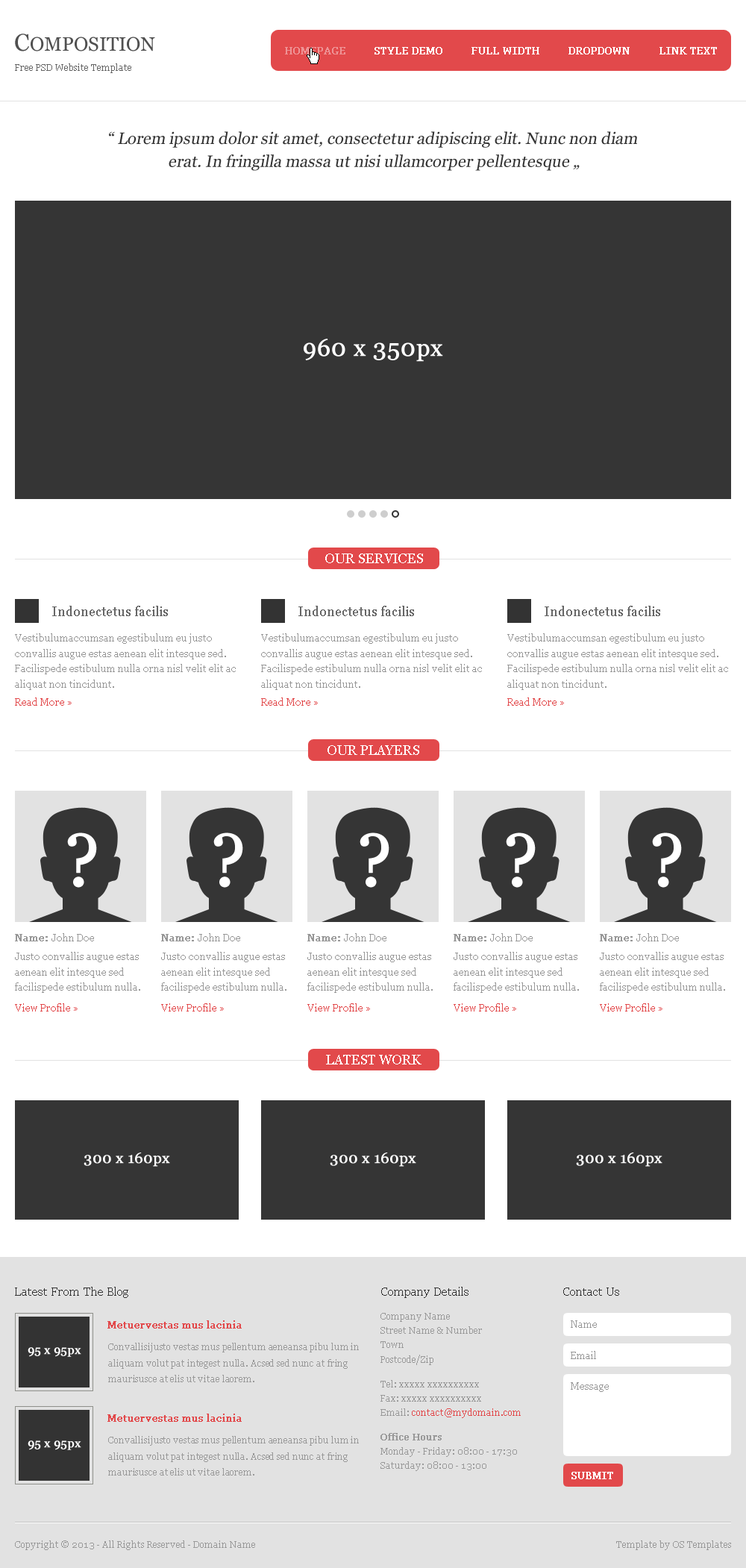
<style>
.page{position:relative;width:746px;height:1568px;background:#ffffff}
.page>*{position:absolute;margin:0}
.t1{font:19.4px "Georgia";color:#505050}
.t2{font:23.9px "Georgia";color:#505050}
.t3{font:9.7px "Georgia";color:#ee9395;font-weight:bold}
.t4{font:9.7px "Georgia";color:#ffffff;font-weight:bold}
.t5{font:9px "Georgia";color:#666666}
.t6{font:16.4px/23px "Georgia";color:#333333;font-style:italic}
.t7{font:23.9px "Georgia";color:#ffffff;font-weight:bold}
.t8{font:13.4px "Georgia";color:#ffffff}
.t9{font:13.4px "Georgia";color:#666666}
.t10{font:9.7px/15.5px "Georgia";color:#979797}
.t11{font:9.7px "Georgia";color:#e2494b}
.t12{font:74.6px "Georgia";color:#ffffff;font-weight:bold}
.t13{font:9.7px "Georgia";color:#979797}
.t14{font:9.7px "Georgia";color:#979797;font-weight:bold}
.t15{font:14.9px "Georgia";color:#ffffff;font-weight:bold}
.t16{font:11.9px "Georgia";color:#333333}
.t17{font:9px/14.3px "Georgia";color:#999999}
.t18{font:9.7px "Georgia";color:#e2494b;font-weight:bold}
.t19{font:9.7px "Georgia";color:#989898}
.t20{font:11.9px "Georgia";color:#ffffff;font-weight:bold}
.t21{font:9px/16.1px "Georgia";letter-spacing:-0.01em;color:#999999}
.t22{font:9px/14.3px "Georgia";color:#e2494b}
.t23{font:9px/14.3px "Georgia";color:#999999;font-weight:bold}
.t24{font:9px "Georgia";color:#999999}
</style>
<div class="page">
<p class="t1" style="left:15px;top:34px;width:140px;height:17px"><span class="t2">C</span>OMPOSITION</p>
<p class="t3" style="left:285px;top:47px;width:60px;height:7px">HOMEPAGE</p>
<p class="t4" style="left:374px;top:47px;width:68px;height:7px">STYLE DEMO</p>
<p class="t4" style="left:471px;top:47px;width:68px;height:7px">FULL WIDTH</p>
<p class="t4" style="left:568px;top:47px;width:62px;height:7px">DROPDOWN</p>
<p class="t4" style="left:659px;top:47px;width:58px;height:7px">LINK TEXT</p>
<p class="t5" style="left:15px;top:63px;width:116px;height:10px">Free PSD Website Template</p>
<p class="t6" style="left:109px;top:131px;width:528px;height:40px;text-align:center">“ Lorem ipsum dolor sit amet, consectetur adipiscing elit. Nunc non diam <br>erat. In fringilla massa ut nisi ullamcorper pellentesque „</p>
<p class="t7" style="left:304px;top:339px;width:139px;height:23px">960 x 350px</p>
<p class="t8" style="left:325px;top:553px;width:98px;height:10px">OUR SERVICES</p>
<p class="t9" style="left:52px;top:606px;width:116px;height:10px">Indonectetus facilis</p>
<p class="t9" style="left:298px;top:606px;width:116px;height:10px">Indonectetus facilis</p>
<p class="t9" style="left:545px;top:606px;width:115px;height:10px">Indonectetus facilis</p>
<p class="t10" style="left:15px;top:633px;width:221px;height:57px">Vestibulumaccumsan egestibulum eu justo convallis augue estas aenean elit intesque sed. Facilispede estibulum nulla orna nisl velit elit ac aliquat non tincidunt.</p>
<p class="t10" style="left:261px;top:633px;width:221px;height:57px">Vestibulumaccumsan egestibulum eu justo convallis augue estas aenean elit intesque sed. Facilispede estibulum nulla orna nisl velit elit ac aliquat non tincidunt.</p>
<p class="t10" style="left:507px;top:633px;width:221px;height:57px">Vestibulumaccumsan egestibulum eu justo convallis augue estas aenean elit intesque sed. Facilispede estibulum nulla orna nisl velit elit ac aliquat non tincidunt.</p>
<p class="t11" style="left:15px;top:697px;width:57px;height:9px">Read More »</p>
<p class="t11" style="left:261px;top:697px;width:57px;height:9px">Read More »</p>
<p class="t11" style="left:507px;top:697px;width:57px;height:9px">Read More »</p>
<p class="t8" style="left:327px;top:745px;width:92px;height:10px">OUR PLAYERS</p>
<p class="t12" style="left:67px;top:832px;width:30px;height:56px">?</p>
<p class="t12" style="left:213px;top:832px;width:30px;height:56px">?</p>
<p class="t12" style="left:360px;top:832px;width:29px;height:56px">?</p>
<p class="t12" style="left:506px;top:832px;width:30px;height:56px">?</p>
<p class="t12" style="left:652px;top:832px;width:30px;height:56px">?</p>
<p class="t13" style="left:15px;top:933px;width:79px;height:8px"><span class="t14">Name: </span>John Doe</p>
<p class="t13" style="left:161px;top:933px;width:79px;height:8px"><span class="t14">Name: </span>John Doe</p>
<p class="t13" style="left:307px;top:933px;width:79px;height:8px"><span class="t14">Name: </span>John Doe</p>
<p class="t13" style="left:454px;top:933px;width:79px;height:8px"><span class="t14">Name: </span>John Doe</p>
<p class="t13" style="left:600px;top:933px;width:79px;height:8px"><span class="t14">Name: </span>John Doe</p>
<p class="t10" style="left:15px;top:952px;width:125px;height:41px">Justo convallis augue estas aenean elit intesque sed facilispede estibulum nulla.</p>
<p class="t10" style="left:161px;top:952px;width:125px;height:41px">Justo convallis augue estas aenean elit intesque sed facilispede estibulum nulla.</p>
<p class="t10" style="left:307px;top:952px;width:126px;height:41px">Justo convallis augue estas aenean elit intesque sed facilispede estibulum nulla.</p>
<p class="t10" style="left:454px;top:952px;width:125px;height:41px">Justo convallis augue estas aenean elit intesque sed facilispede estibulum nulla.</p>
<p class="t10" style="left:600px;top:952px;width:125px;height:41px">Justo convallis augue estas aenean elit intesque sed facilispede estibulum nulla.</p>
<p class="t11" style="left:15px;top:1003px;width:63px;height:9px">View Profile »</p>
<p class="t11" style="left:161px;top:1003px;width:63px;height:9px">View Profile »</p>
<p class="t11" style="left:307px;top:1003px;width:63px;height:9px">View Profile »</p>
<p class="t11" style="left:454px;top:1003px;width:62px;height:9px">View Profile »</p>
<p class="t11" style="left:600px;top:1003px;width:62px;height:9px">View Profile »</p>
<p class="t8" style="left:326px;top:1055px;width:95px;height:9px">LATEST WORK</p>
<p class="t15" style="left:84px;top:1153px;width:86px;height:14px">300 x 160px</p>
<p class="t15" style="left:330px;top:1153px;width:86px;height:14px">300 x 160px</p>
<p class="t15" style="left:576px;top:1153px;width:86px;height:14px">300 x 160px</p>
<p class="t16" style="left:15px;top:1287px;width:113px;height:11px">Latest From The Blog</p>
<p class="t16" style="left:381px;top:1287px;width:87px;height:11px">Company Details</p>
<p class="t16" style="left:563px;top:1288px;width:56px;height:8px">Contact Us</p>
<p class="t17" style="left:380px;top:1313px;width:102px;height:52px">Company Name<br>Street Name &amp; Number<br>Town<br>Postcode/Zip</p>
<p class="t18" style="left:107px;top:1320px;width:135px;height:9px">Metuervestas mus lacinia</p>
<p class="t19" style="left:571px;top:1320px;width:26px;height:8px">Name</p>
<p class="t20" style="left:28px;top:1347px;width:53px;height:10px">95 x 95px</p>
<p class="t21" style="left:108px;top:1343px;width:251px;height:39px">Convallisijusto vestas mus pellentum aeneansa pibu lum in aliquam volut pat integest nulla. Acsed sed nunc at fring maurisusce at elis ut vitae laorem.</p>
<p class="t19" style="left:571px;top:1351px;width:25px;height:8px">Email</p>
<p class="t17" style="left:380px;top:1380px;width:141px;height:38px">Tel: xxxxx xxxxxxxxxx<br>Fax: xxxxx xxxxxxxxxx<br>Email: <span class="t22">contact@mydomain.com</span></p>
<p class="t19" style="left:571px;top:1382px;width:38px;height:10px">Message</p>
<p class="t18" style="left:107px;top:1414px;width:135px;height:8px">Metuervestas mus lacinia</p>
<p class="t17" style="left:380px;top:1433px;width:137px;height:38px"><span class="t23">Office Hours<br></span>Monday - Friday: 08:00 - 17:30<br>Saturday: 08:00 - 13:00</p>
<p class="t20" style="left:28px;top:1440px;width:53px;height:10px">95 x 95px</p>
<p class="t21" style="left:108px;top:1436px;width:251px;height:40px">Convallisijusto vestas mus pellentum aeneansa pibu lum in aliquam volut pat integest nulla. Acsed sed nunc at fring maurisusce at elis ut vitae laorem.</p>
<p class="t4" style="left:571px;top:1472px;width:42px;height:7px">SUBMIT</p>
<p class="t24" style="left:15px;top:1540px;width:240px;height:10px">Copyright © 2013 - All Rights Reserved - Domain Name</p>
<p class="t24" style="left:616px;top:1540px;width:115px;height:10px">Template by OS Templates</p>
</div>
